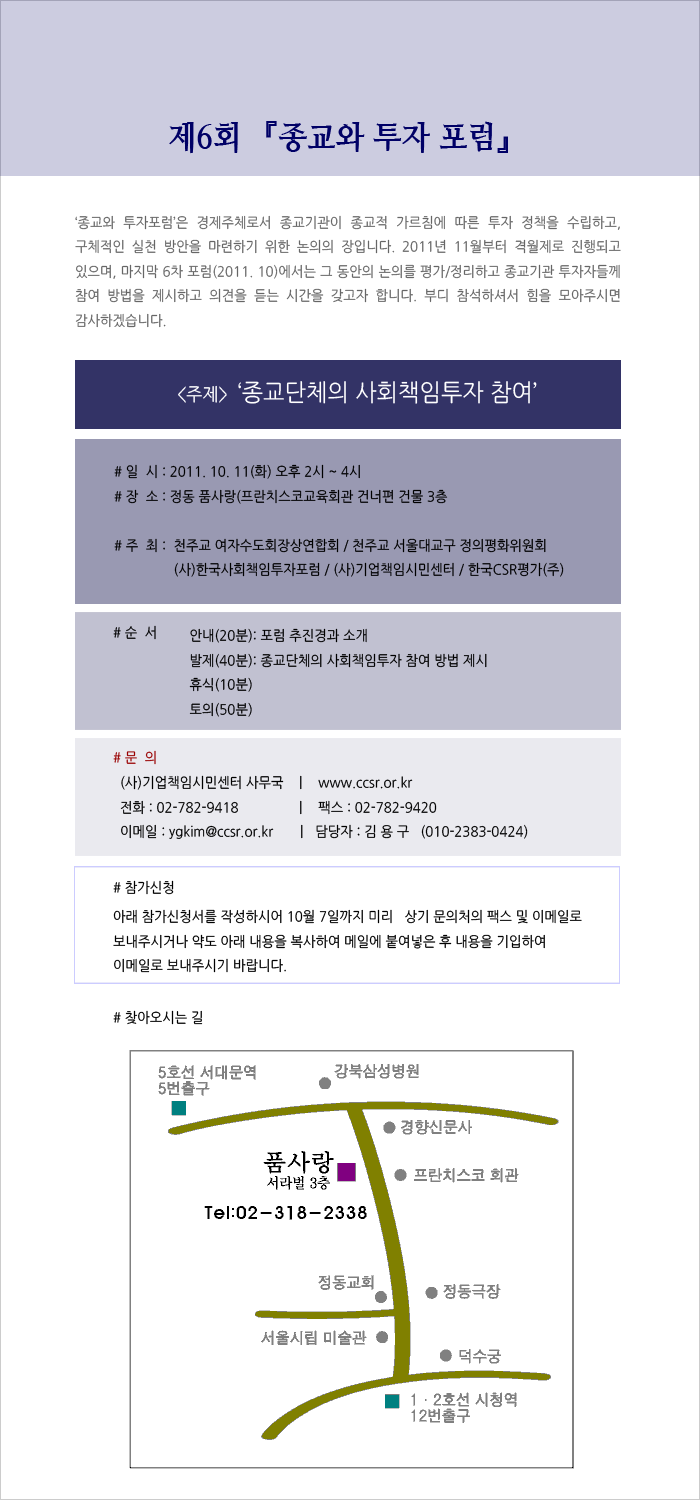
<style>
.page{position:relative;width:700px;height:1500px;background:#ffffff}
.page>*{position:absolute;margin:0}
.t1{font:31.5px "NanumMyeongjoExtraBold";color:#000066;scale:0.95 1}
.t2{font:14px "NanumGothic";color:#666666;scale:0.95 1}
.t3{font:24px "NanumGothic";color:#ffffff;scale:0.95 1}
.t4{font:18px "NanumGothic";color:#ffffff;scale:0.95 1}
.t5{font:14px "NanumGothic";color:#000000;scale:0.95 1}
.t6{font:14px "NanumGothic";scale:0.95 1}
.t7{font:14px "NanumGothic";color:#990000;scale:0.95 1}
</style>
<div class="page">
<p class="t1" style="left:169px;top:121px;width:339px;height:33px">제6회 『종교와 투자 포럼』</p>
<p class="t2" style="left:75px;top:215px;width:546px;height:113px;text-align:justify">‘종교와 투자포럼’은 경제주체로서 종교기관이 종교적 가르침에 따른 투자 정책을 수립하고, 구체적인 실천 방안을 마련하기 위한 논의의 장입니다. 2011년 11월부터 격월제로 진행되고 있으며, 마지막 6차 포럼(2011. 10)에서는 그 동안의 논의를 평가/정리하고 종교기관 투자자들께 참여 방법을 제시하고 의견을 듣는 시간을 갖고자 합니다. 부디 참석하셔서 힘을 모아주시면 감사하겠습니다.</p>
<p class="t3" style="left:178px;top:381px;width:359px;height:23px"><span class="t4">&lt;주제&gt;  </span>‘종교단체의 사회책임투자 참여’</p>
<p class="t5" style="left:114px;top:464px;width:450px;height:113px;text-align:justify"># 일  시 : 2011. 10. 11(화) 오후 2시 ~ 4시<br># 장  소 : 정동 품사랑(프란치스코교육회관 건너편 건물 3층<br><br># 주  최 :  천주교 여자수도회장상연합회 / 천주교 서울대교구 정의평화위원회<br>                (사)한국사회책임투자포럼 / (사)기업책임시민센터 / 한국CSR평가(주)</p>
<p class="t6" style="left:113px;top:625px;width:43px;height:15px"># 순  서</p>
<p class="t5" style="left:189px;top:628px;width:298px;height:89px;text-align:justify">안내(20분): 포럼 추진경과 소개<br>  발제(40분): 종교단체의 사회책임투자 참여 방법 제시<br>  휴식(10분)<br>  토의(50분)</p>
<p class="t7" style="left:113px;top:750px;width:43px;height:15px"># 문  의</p>
<p class="t5" style="left:120px;top:775px;width:408px;height:64px;text-align:justify">(사)기업책임시민센터 사무국   ㅣ   www.ccsr.or.kr<br>전화 : 02-782-9418               ㅣ   팩스 : 02-782-9420<br>이메일 : ygkim@ccsr.or.kr      ㅣ  담당자 : 김 용 구   (010-2383-0424)</p>
<p class="t5" style="left:113px;top:880px;width:61px;height:15px"># 참가신청</p>
<p class="t5" style="left:113px;top:909px;width:469px;height:64px;text-align:justify">아래 참가신청서를 작성하시어 10월 7일까지 미리   상기 문의처의 팩스 및 이메일로<br>보내주시거나 약도 아래 내용을 복사하여 메일에 붙여넣은 후 내용을 기입하여 <br>이메일로 보내주시기 바랍니다.</p>
<p class="t5" style="left:113px;top:1010px;width:90px;height:15px"># 찾아오시는 길</p>
</div>
